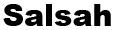
<style>
.page{position:relative;width:115px;height:30px;background:#ffffff}
.page>*{position:absolute;margin:0}
.t1{font:30px "Arial-Black";color:#000000}
</style>
<div class="page">
<p class="t1" style="left:3px;top:4px;width:108px;height:22px">Salsah</p>
</div>
